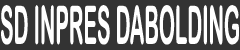
<style>
.page{position:relative;width:240px;height:50px;background:#333333}
.page>*{position:absolute;margin:0}
.t1{font:53px "ArialRoundedMTBold";color:#ffffff;scale:0.38 1}
</style>
<div class="page">
<p class="t1" style="left:1px;top:5px;width:238px;height:40px">SD INPRES DABOLDING</p>
</div>
